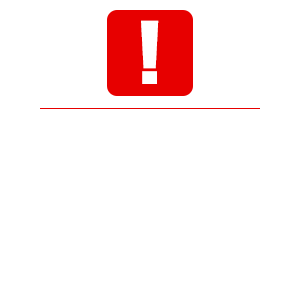
<style>
.page{position:relative;width:300px;height:300px;background:#ffffff}
.page>*{position:absolute;margin:0}
.t1{font:80px "Impact";color:#ffffff}
</style>
<div class="page">
<p class="t1" style="left:141px;top:20px;width:18px;height:64px">!</p>
</div>
